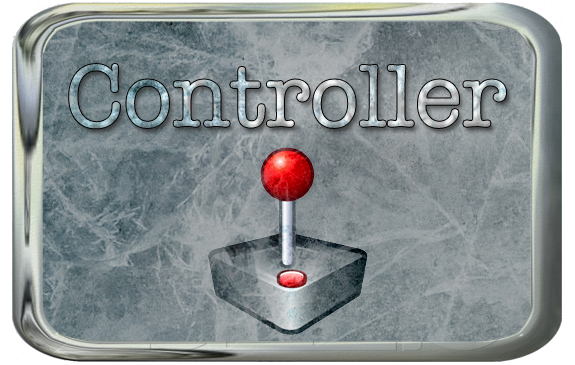
<style>
.page{position:relative;width:575px;height:365px}
.page>*{position:absolute;margin:0}
.t1{font:90px "AmericanTypewriter"}
</style>
<div class="page">
<p class="t1" style="left:69px;top:64px;width:437px;height:65px">Controller</p>
</div>
